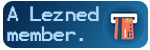
<style>
.page{position:relative;width:150px;height:50px}
.page>*{position:absolute;margin:0}
.t1{font:16.7px "Terminal";letter-spacing:-0.06em;color:#afdcfc}
</style>
<div class="page">
<p class="t1" style="left:7px;top:6px;width:92px;height:35px">A Lezned<br>member.</p>
</div>
